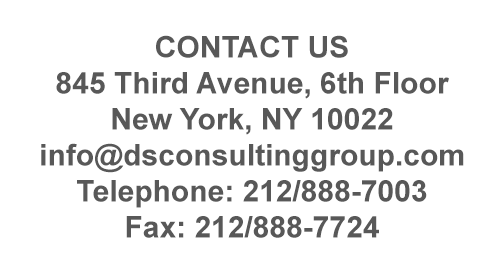
<style>
.page{position:relative;width:504px;height:279px;background:#ffffff}
.page>*{position:absolute;margin:0}
.t1{font:30px "Arial-BoldMT";color:#585858}
</style>
<div class="page">
<p class="t1" style="left:41px;top:35px;width:423px;height:203px;text-align:center">CONTACT US<br>845 Third Avenue, 6th Floor<br>New York, NY 10022<br>info@dsconsultinggroup.com<br>Telephone: 212/888-7003<br>Fax: 212/888-7724</p>
</div>
